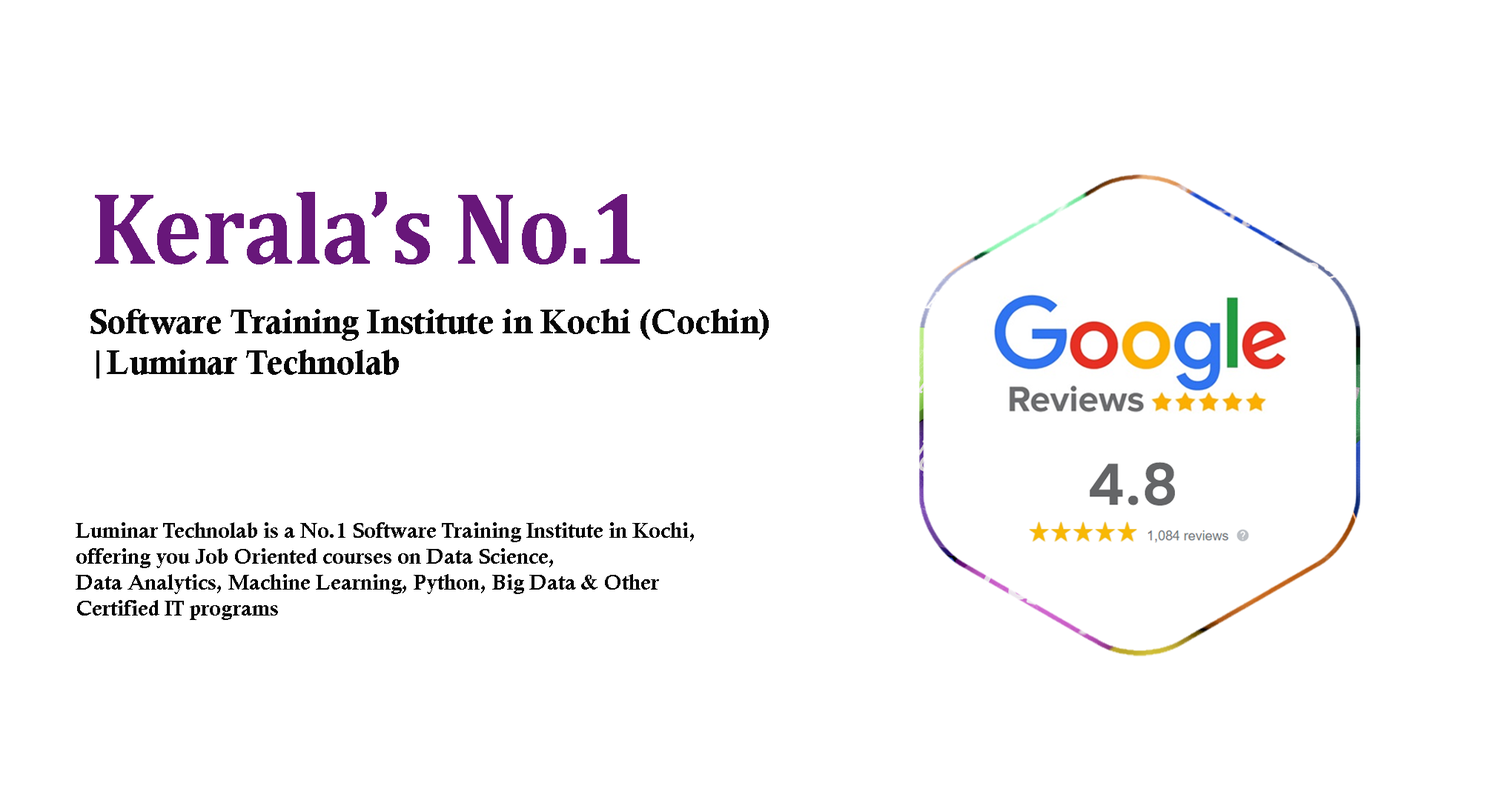
<style>
.page{position:relative;width:1490px;height:800px;background:#ffffff}
.page>*{position:absolute;margin:0}
.t1{font:103.1px "Cambria-Bold";color:#68177a;scale:0.9 1}
.t2{font:34px "CalisMTBol";color:#070707}
.t3{font:21.6px "CalisMTBol";color:#070707}
</style>
<div class="page">
<p class="t1" style="left:95px;top:192px;width:545px;height:73px">Kerala’s No.1</p>
<p class="t2" style="left:90px;top:309px;width:679px;height:70px">Software Training Institute in Kochi (Cochin) <br>|Luminar Technolab</p>
<p class="t3" style="left:76px;top:523px;width:618px;height:97px">Luminar Technolab is a No.1 Software Training Institute in Kochi,<br>offering you Job Oriented courses on Data Science,<br>Data Analytics, Machine Learning, Python, Big Data &amp; Other <br>Certified IT programs</p>
</div>
